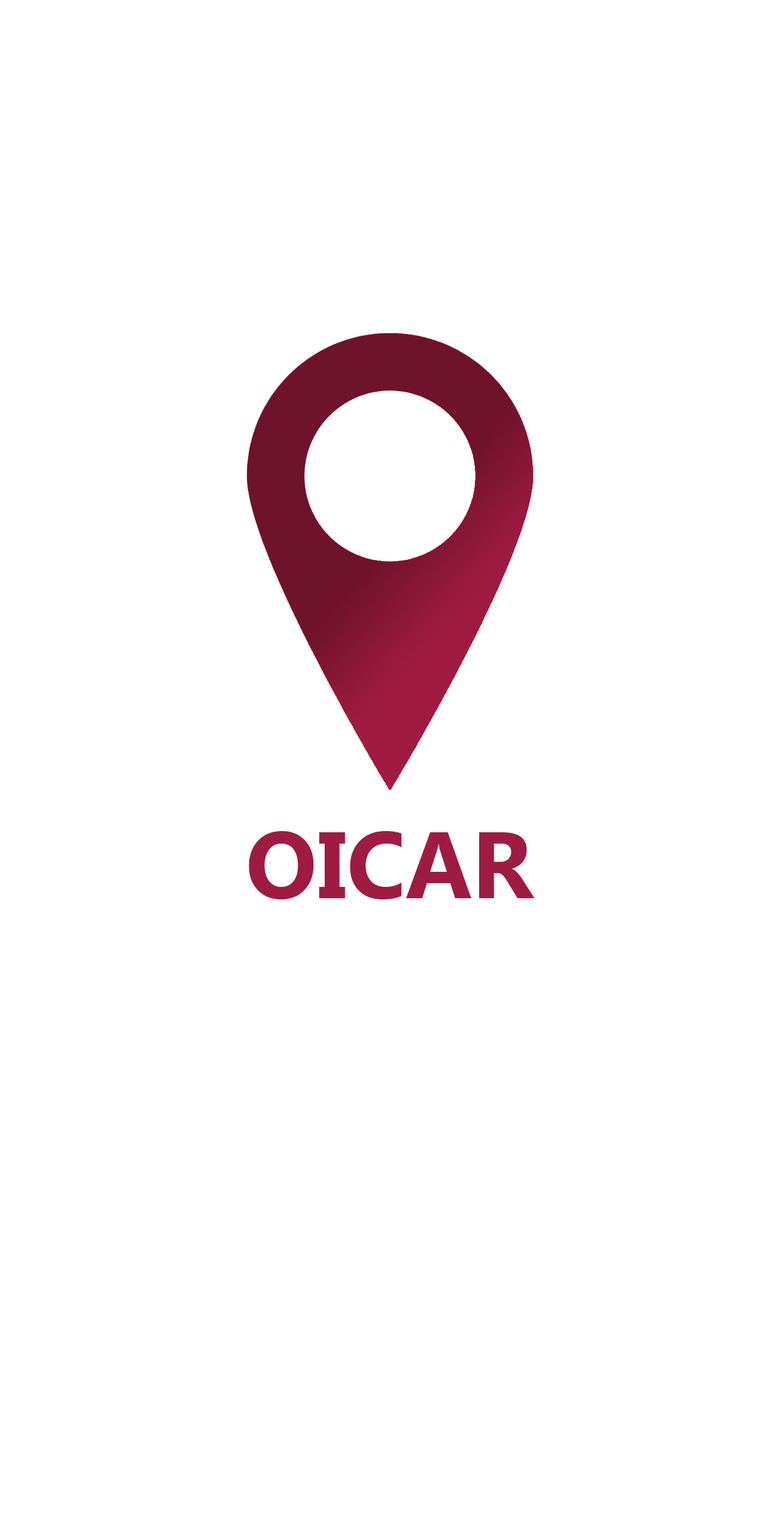
<style>
.page{position:relative;width:780px;height:1529px;background:#ffffff}
.page>*{position:absolute;margin:0}
.t1{font:94.2px "MicrosoftTaiLe-Bold";color:#9f1b41}
</style>
<div class="page">
<p class="t1" style="left:249px;top:831px;width:286px;height:69px">OICAR</p>
</div>
